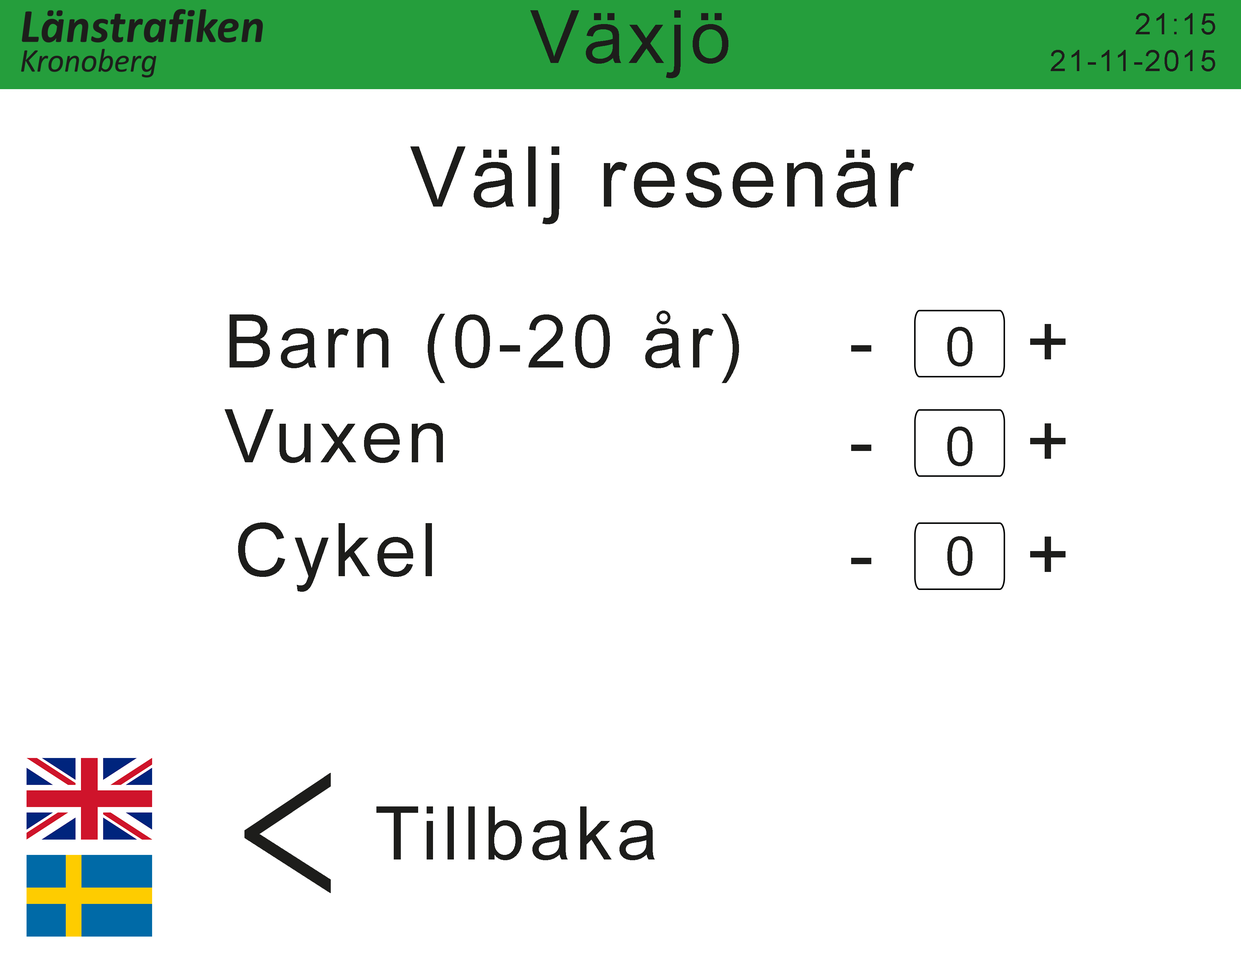
<style>
.page{position:relative;width:1241px;height:961px;background:#ffffff}
.page>*{position:absolute;margin:0}
.t1{font:73.4px "ArialMT";letter-spacing:0.06em;color:#1d1d1b}
.t2{font:29.8px "ArialMT";letter-spacing:0.06em;color:#1d1d1b}
.t3{font:84px "ArialMT";letter-spacing:0.06em;color:#1d1d1b}
.t4{font:73.8px "ArialMT";letter-spacing:0.06em;color:#1d1d1b}
.t5{font:53.7px "ArialMT";letter-spacing:0.06em;color:#1d1d1b}
.t6{font:226px "BanglaMN";letter-spacing:0.06em;color:#1d1d1b;scale:0.65 1}
</style>
<div class="page">
<p class="t1" style="left:530px;top:10px;width:198px;height:68px">Växjö</p>
<p class="t2" style="left:1135px;top:13px;width:80px;height:22px">21:15</p>
<p class="t2" style="left:1051px;top:50px;width:164px;height:21px">21-11-2015</p>
<p class="t3" style="left:410px;top:146px;width:504px;height:78px">Välj resenär</p>
<p class="t4" style="left:230px;top:311px;width:509px;height:72px">Barn (0-20 år)</p>
<p class="t5" style="left:947px;top:327px;width:25px;height:39px">0</p>
<p class="t4" style="left:1030px;top:324px;width:35px;height:35px">+</p>
<p class="t4" style="left:225px;top:409px;width:218px;height:54px">Vuxen</p>
<p class="t4" style="left:1030px;top:423px;width:35px;height:36px">+</p>
<p class="t5" style="left:947px;top:427px;width:25px;height:39px">0</p>
<p class="t4" style="left:238px;top:522px;width:194px;height:70px">Cykel</p>
<p class="t5" style="left:947px;top:536px;width:25px;height:40px">0</p>
<p class="t4" style="left:1030px;top:537px;width:35px;height:35px">+</p>
<p class="t6" style="left:244px;top:773px;width:87px;height:120px">&lt;</p>
<p class="t4" style="left:376px;top:806px;width:279px;height:54px">Tillbaka</p>
</div>
